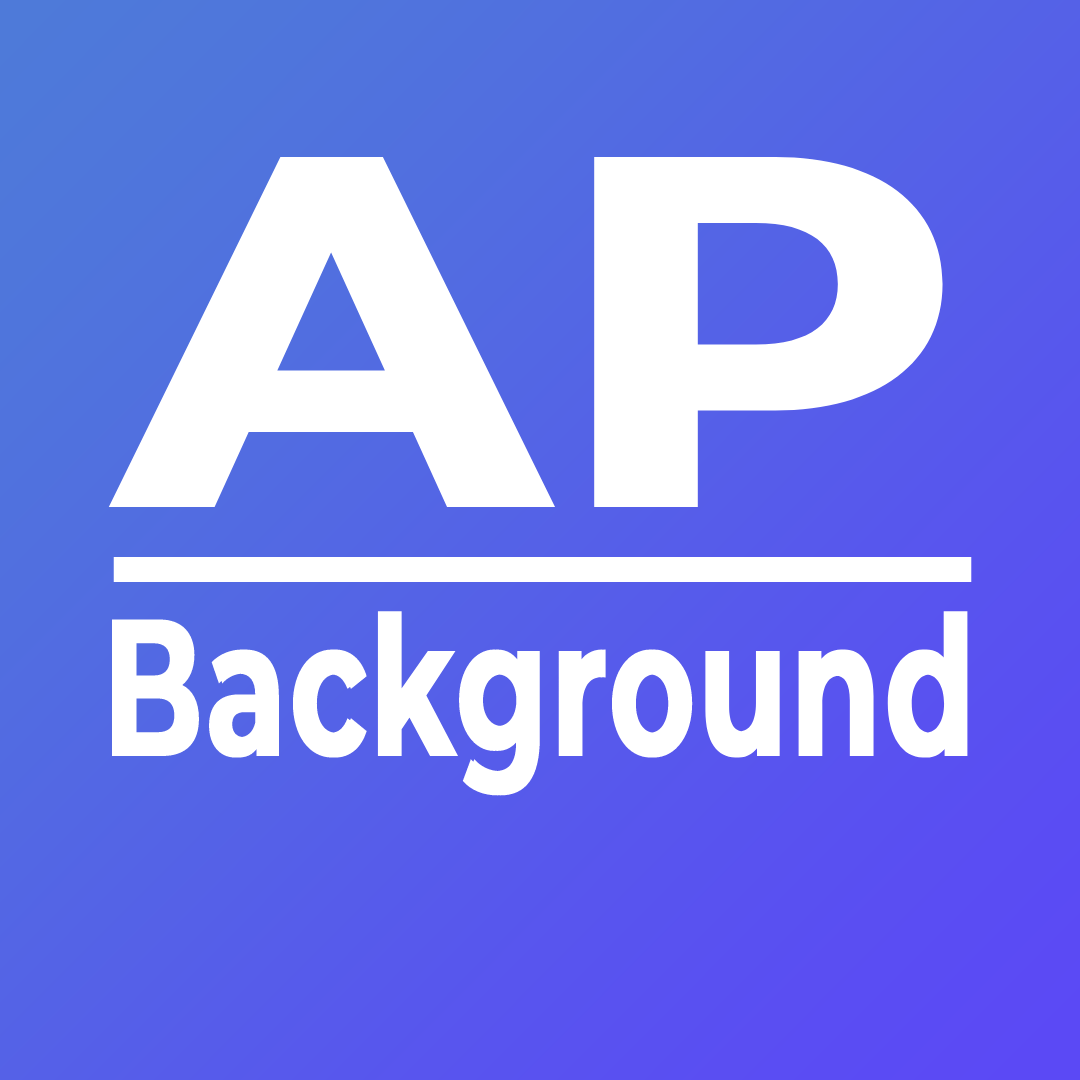
<style>
.page{position:relative;width:1080px;height:1080px}
.page>*{position:absolute;margin:0}
.t1{font:500px "Montserrat-Bold";color:#ffffff;font-weight:bold;text-decoration:underline;scale:1.1 1}
.t2{font:195px "Montserrat-Bold";color:#ffffff;font-weight:bold;scale:0.67 1}
</style>
<div class="page">
<p class="t1" style="left:108px;top:157px;width:864px;height:425px">AP</p>
<p class="t2" style="left:112px;top:611px;width:856px;height:185px">Background</p>
</div>
